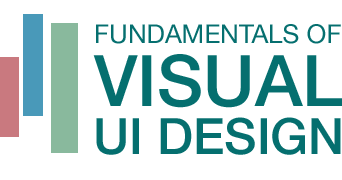
<style>
.page{position:relative;width:342px;height:180px;background:#ffffff}
.page>*{position:absolute;margin:0}
.t1{font:26px "HelveticaNeue";color:#056f6f}
.t2{font:71.2px "HelveticaNeue-Medium";color:#056f6f}
.t3{font:49.9px "HelveticaNeue-Medium";color:#056f6f}
</style>
<div class="page">
<p class="t1" style="left:96px;top:24px;width:245px;height:20px">FUNDAMENTALS OF</p>
<p class="t2" style="left:93px;top:54px;width:249px;height:54px">VISUAL</p>
<p class="t3" style="left:96px;top:117px;width:245px;height:38px">UI DESIGN</p>
</div>
